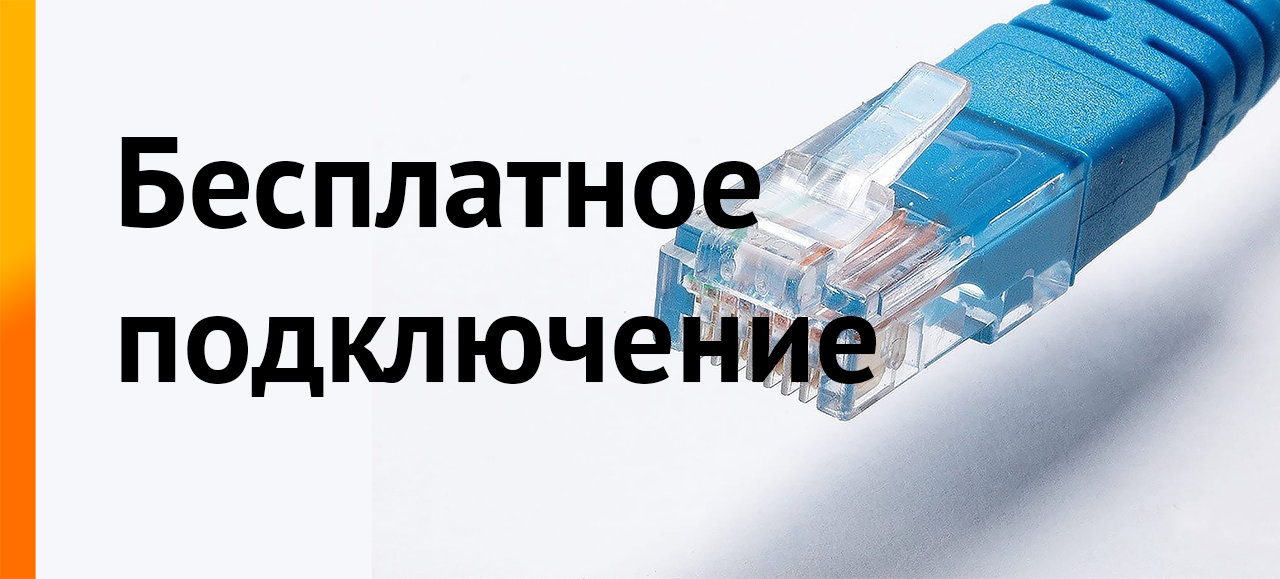
<style>
.page{position:relative;width:1280px;height:579px;background:#f6f7fb}
.page>*{position:absolute;margin:0}
.t1{font:128.8px "PTSans-Bold";color:#000000}
</style>
<div class="page">
<p class="t1" style="left:121px;top:137px;width:756px;height:260px">Бесплатное<br>подключение</p>
</div>
